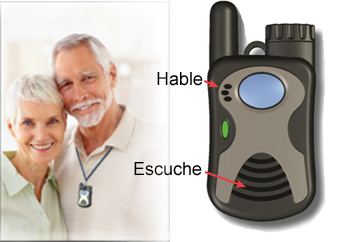
<style>
.page{position:relative;width:364px;height:242px;background:#ffffff}
.page>*{position:absolute;margin:0}
.t1{font:18px "ArialMT";color:#000000}
</style>
<div class="page">
<p class="t1" style="left:157px;top:72px;width:46px;height:14px">Hable</p>
<p class="t1" style="left:134px;top:162px;width:68px;height:14px">Escuche</p>
</div>
